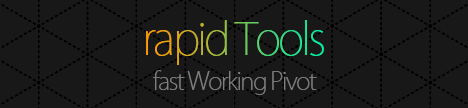
<style>
.page{position:relative;width:468px;height:108px;background:#181818}
.page>*{position:absolute;margin:0}
.t1{font:44.1px "KozGoPr6N-ExtraLight";letter-spacing:-0.06em}
.t2{font:24.1px "KozGoPr6N-ExtraLight";letter-spacing:-0.06em;color:#7f7f7f}
</style>
<div class="page">
<p class="t1" style="left:146px;top:20px;width:178px;height:45px">rapid Tools</p>
<p class="t2" style="left:153px;top:70px;width:164px;height:25px">fast Working Pivot</p>
</div>
